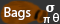
<style>
.page{position:relative;width:60px;height:24px;background:#333333}
.page>*{position:absolute;margin:0}
.t1{font:12px "Verdana-Bold";color:#ffffff}
.t2{font:14px "MyriadPro-Regular";color:#ffffff}
.t3{font:12px "MyriadPro-Regular";color:#ffffff}
</style>
<div class="page">
<p class="t1" style="left:46px;top:5px;width:9px;height:7px">σ</p>
<p class="t2" style="left:4px;top:7px;width:27px;height:13px">Bags</p>
<p class="t3" style="left:43px;top:17px;width:7px;height:6px">π</p>
<p class="t3" style="left:53px;top:13px;width:6px;height:9px">θ</p>
</div>
